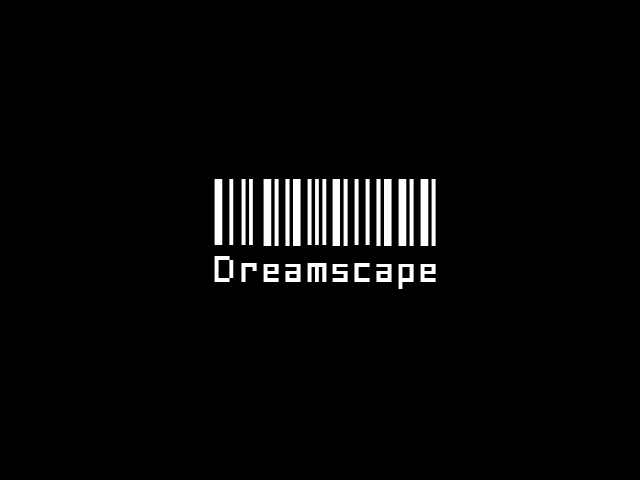
<style>
.page{position:relative;width:640px;height:480px;background:#000000}
.page>*{position:absolute;margin:0}
.t1{font:96px "Paskowy";color:#ffffff}
</style>
<div class="page">
<p class="t1" style="left:214px;top:179px;width:222px;height:110px">Dreamscape</p>
</div>
